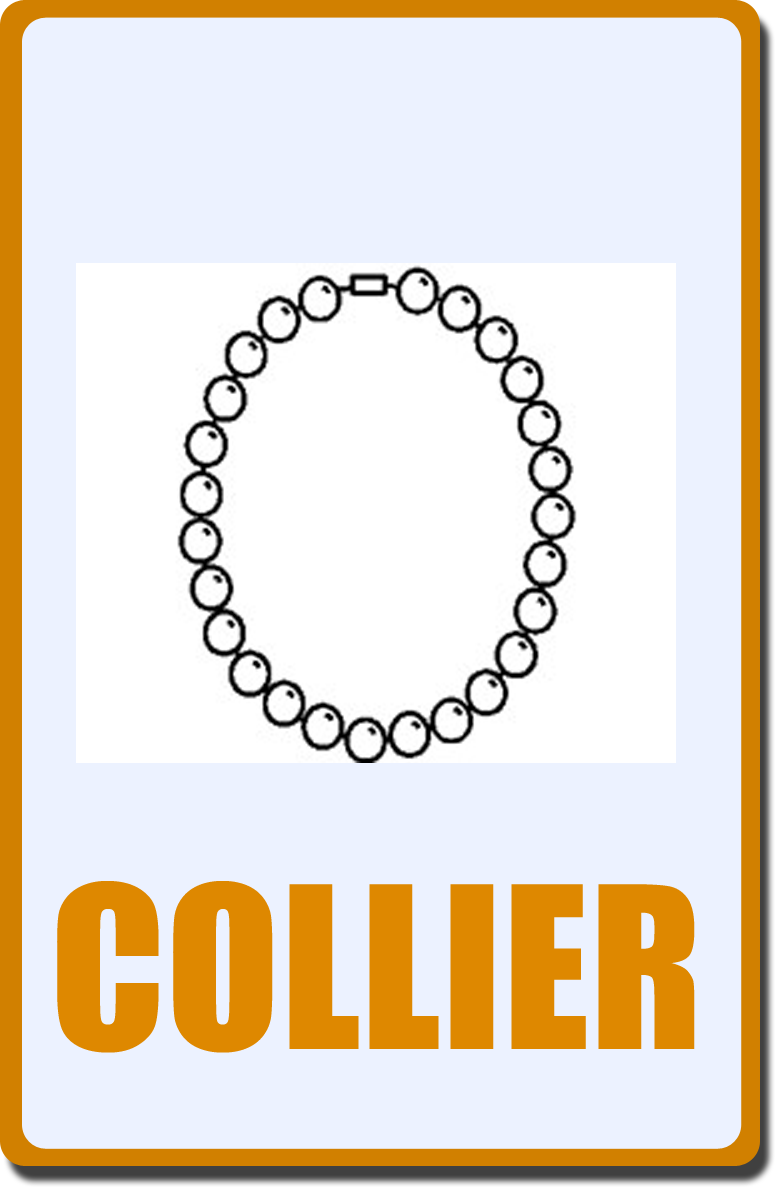
<style>
.page{position:relative;width:775px;height:1187px;background:#ecf2ff}
.page>*{position:absolute;margin:0}
.t1{font:208.3px "Impact";letter-spacing:0.005em;color:#de8800}
</style>
<div class="page">
<p class="t1" style="left:57px;top:881px;width:638px;height:172px">COLLIER</p>
</div>
